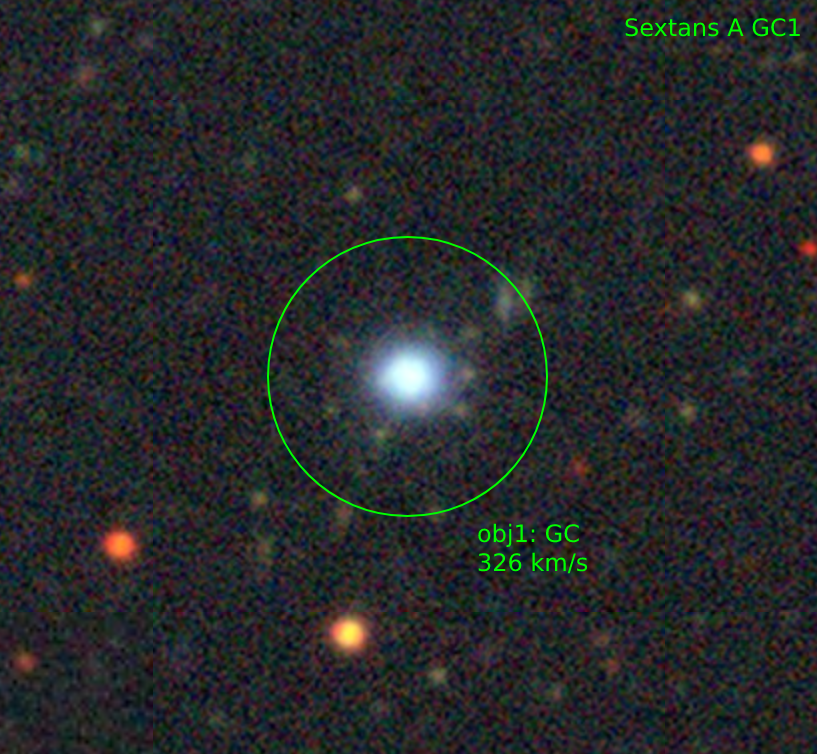
<style>
.page{position:relative;width:817px;height:754px}
.page>*{position:absolute;margin:0}
.t1{font:24px "DejaVuSans";color:#00ff00}
</style>
<div class="page">
<p class="t1" style="left:625px;top:18px;width:175px;height:19px">Sextans A GC1</p>
<p class="t1" style="left:478px;top:523px;width:110px;height:51px">obj1: GC<br>326 km/s</p>
</div>
